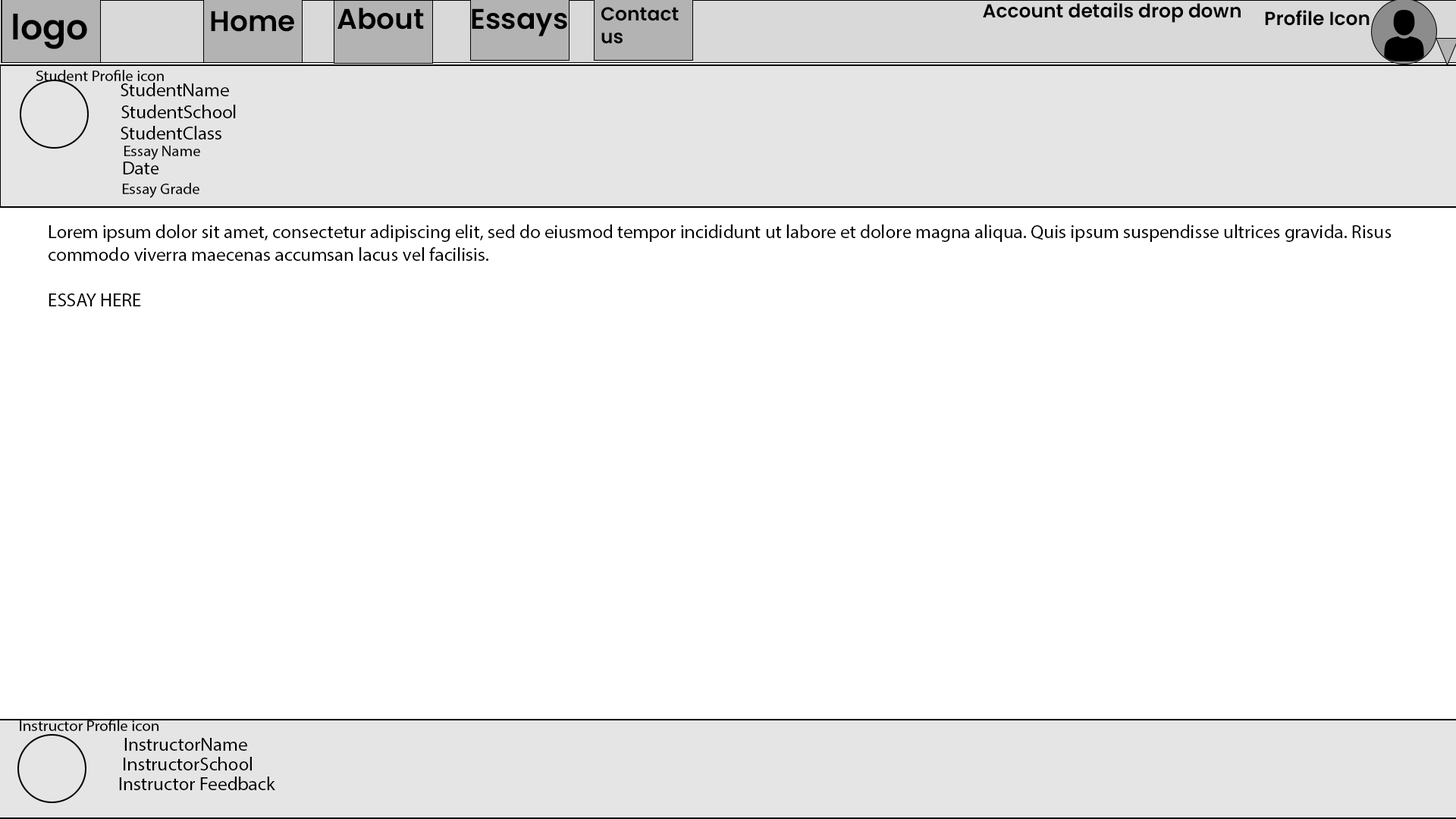
<style>
.page{position:relative;width:1456px;height:819px;background:#ffffff}
.page>*{position:absolute;margin:0}
.t1{font:19px "Poppins-SemiBold";color:#000000}
.t2{font:34.8px "Poppins-SemiBold";color:#000000}
.t3{font:28.4px "Poppins-SemiBold";color:#000000}
.t4{font:15.8px "MyriadPro-Regular";color:#000000}
.t5{font:19px "MyriadPro-Regular";color:#000000}
</style>
<div class="page">
<p class="t1" style="left:983px;top:2px;width:258px;height:21px">Account details drop down</p>
<p class="t2" style="left:13px;top:14px;width:74px;height:35px">logo</p>
<p class="t3" style="left:211px;top:11px;width:83px;height:21px">Home</p>
<p class="t3" style="left:337px;top:8px;width:87px;height:22px">About</p>
<p class="t3" style="left:472px;top:8px;width:95px;height:28px">Essays</p>
<p class="t1" style="left:601px;top:7px;width:78px;height:37px">Contact us</p>
<p class="t1" style="left:1265px;top:10px;width:105px;height:16px">Profile Icon</p>
<p class="t4" style="left:36px;top:70px;width:128px;height:11px">Student Profile icon</p>
<p class="t5" style="left:121px;top:83px;width:108px;height:13px">StudentName</p>
<p class="t5" style="left:121px;top:105px;width:115px;height:13px">StudentSchool</p>
<p class="t5" style="left:121px;top:126px;width:100px;height:14px">StudentClass</p>
<p class="t4" style="left:124px;top:146px;width:76px;height:14px">Essay Name</p>
<p class="t5" style="left:123px;top:162px;width:36px;height:12px">Date</p>
<p class="t4" style="left:122px;top:183px;width:77px;height:15px">Essay Grade</p>
<p class="t5" style="left:49px;top:224px;width:1343px;height:82px">Lorem ipsum dolor sit amet, consectetur adipiscing elit, sed do eiusmod tempor incididunt ut labore et dolore magna aliqua. Quis ipsum suspendisse ultrices gravida. Risus commodo viverra maecenas accumsan lacus vel facilisis. <br><br>ESSAY HERE</p>
<p class="t4" style="left:20px;top:720px;width:139px;height:11px">Instructor Profile icon</p>
<p class="t5" style="left:124px;top:738px;width:123px;height:13px">InstructorName</p>
<p class="t5" style="left:124px;top:757px;width:128px;height:13px">InstructorSchool</p>
<p class="t5" style="left:119px;top:777px;width:156px;height:13px">Instructor Feedback</p>
</div>
